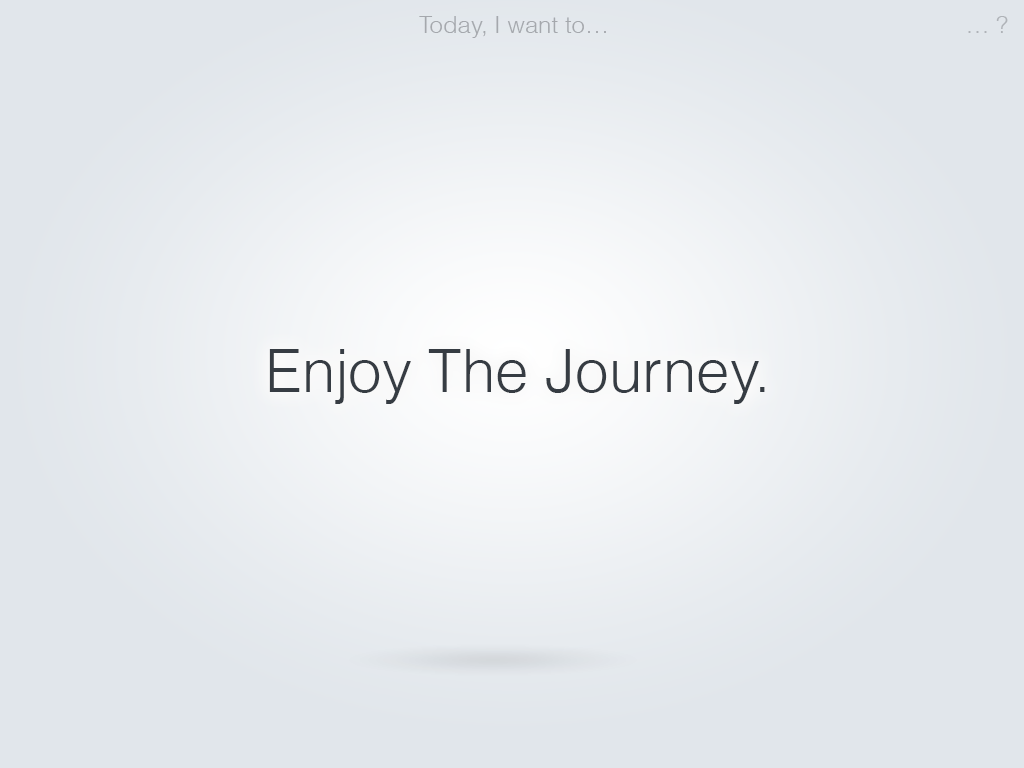
<style>
.page{position:relative;width:1024px;height:768px;background:#e1e6eb}
.page>*{position:absolute;margin:0}
.t1{font:24px "Helvetica-Light";color:#a5a9ad}
.t2{font:24px "Helvetica-Light";color:#afb3b8}
.t3{font:60px "Helvetica-Light";color:#363c43}
</style>
<div class="page">
<p class="t1" style="left:419px;top:16px;width:187px;height:22px">Today, I want to…</p>
<p class="t2" style="left:968px;top:16px;width:40px;height:17px">… ?</p>
<p class="t3" style="left:269px;top:349px;width:496px;height:55px">Enjoy The Journey.</p>
</div>
